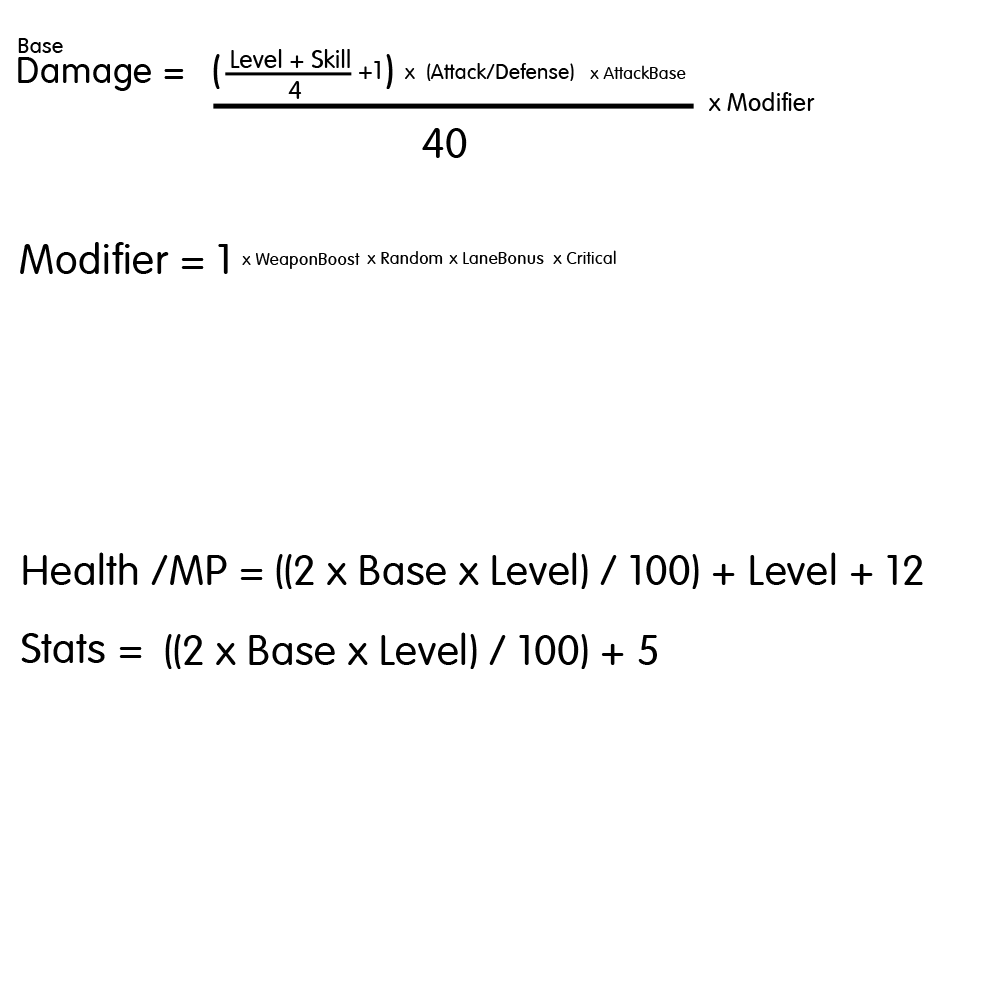
<style>
.page{position:relative;width:1000px;height:1000px;background:#ffffff}
.page>*{position:absolute;margin:0}
.t1{font:21.5px "VAGRounded-Lt-Normal";letter-spacing:0.02em;color:#000000}
.t2{font:42px "VAGRounded-Lt-Normal";letter-spacing:0.02em;color:#000000}
.t3{font:24.8px "VAGRounded-Lt-Normal";letter-spacing:0.02em;color:#000000}
.t4{font:36.3px "VAGRounded-Lt-Normal";letter-spacing:0.02em;color:#000000}
.t5{font:21px "VAGRounded-Lt-Normal";letter-spacing:0.02em;color:#000000}
.t6{font:17.3px "VAGRounded-Lt-Normal";letter-spacing:0.02em;color:#000000}
.t7{font:24.6px "VAGRounded-Lt-Normal";letter-spacing:0.02em;color:#000000}
</style>
<div class="page">
<p class="t1" style="left:18px;top:38px;width:45px;height:15px">Base</p>
<p class="t2" style="left:213px;top:54px;width:180px;height:35px">(               )</p>
<p class="t3" style="left:231px;top:49px;width:119px;height:19px">Level + Skill</p>
<p class="t4" style="left:18px;top:57px;width:166px;height:34px">Damage =</p>
<p class="t3" style="left:359px;top:61px;width:21px;height:18px">+1</p>
<p class="t5" style="left:405px;top:63px;width:169px;height:18px">x  (Attack/Defense)</p>
<p class="t6" style="left:590px;top:65px;width:96px;height:14px">x AttackBase</p>
<p class="t3" style="left:288px;top:81px;width:14px;height:18px">4</p>
<p class="t7" style="left:709px;top:92px;width:106px;height:19px">x Modifier</p>
<p class="t2" style="left:422px;top:128px;width:45px;height:30px">40</p>
<p class="t2" style="left:20px;top:242px;width:208px;height:32px">Modifier = 1</p>
<p class="t6" style="left:242px;top:253px;width:118px;height:16px">x WeaponBoost</p>
<p class="t6" style="left:367px;top:251px;width:76px;height:13px">x Random</p>
<p class="t6" style="left:449px;top:252px;width:95px;height:12px">x LaneBonus</p>
<p class="t6" style="left:553px;top:250px;width:63px;height:14px">x Critical</p>
<p class="t2" style="left:23px;top:552px;width:240px;height:33px">Health /MP =</p>
<p class="t2" style="left:276px;top:552px;width:647px;height:37px">((2 x Base x Level) / 100) + Level + 12</p>
<p class="t2" style="left:21px;top:633px;width:121px;height:30px">Stats =</p>
<p class="t2" style="left:165px;top:632px;width:492px;height:37px">((2 x Base x Level) / 100) + 5</p>
</div>
